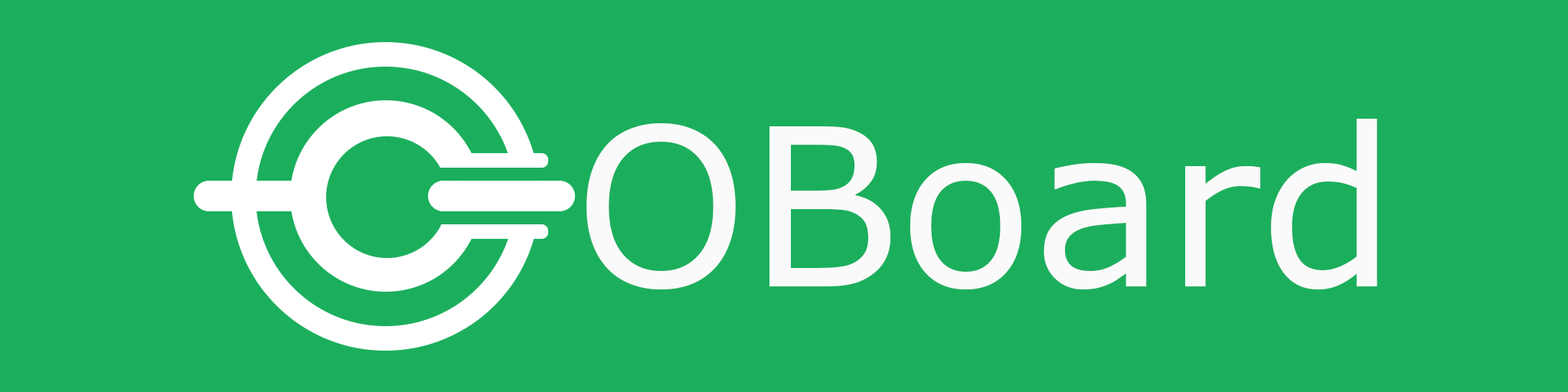
<style>
.page{position:relative;width:1568px;height:392px;background:#1baf5d}
.page>*{position:absolute;margin:0}
.t1{font:220.5px "Verdana";color:#fafafa}
</style>
<div class="page">
<p class="t1" style="left:586px;top:119px;width:791px;height:170px">OBoard</p>
</div>
